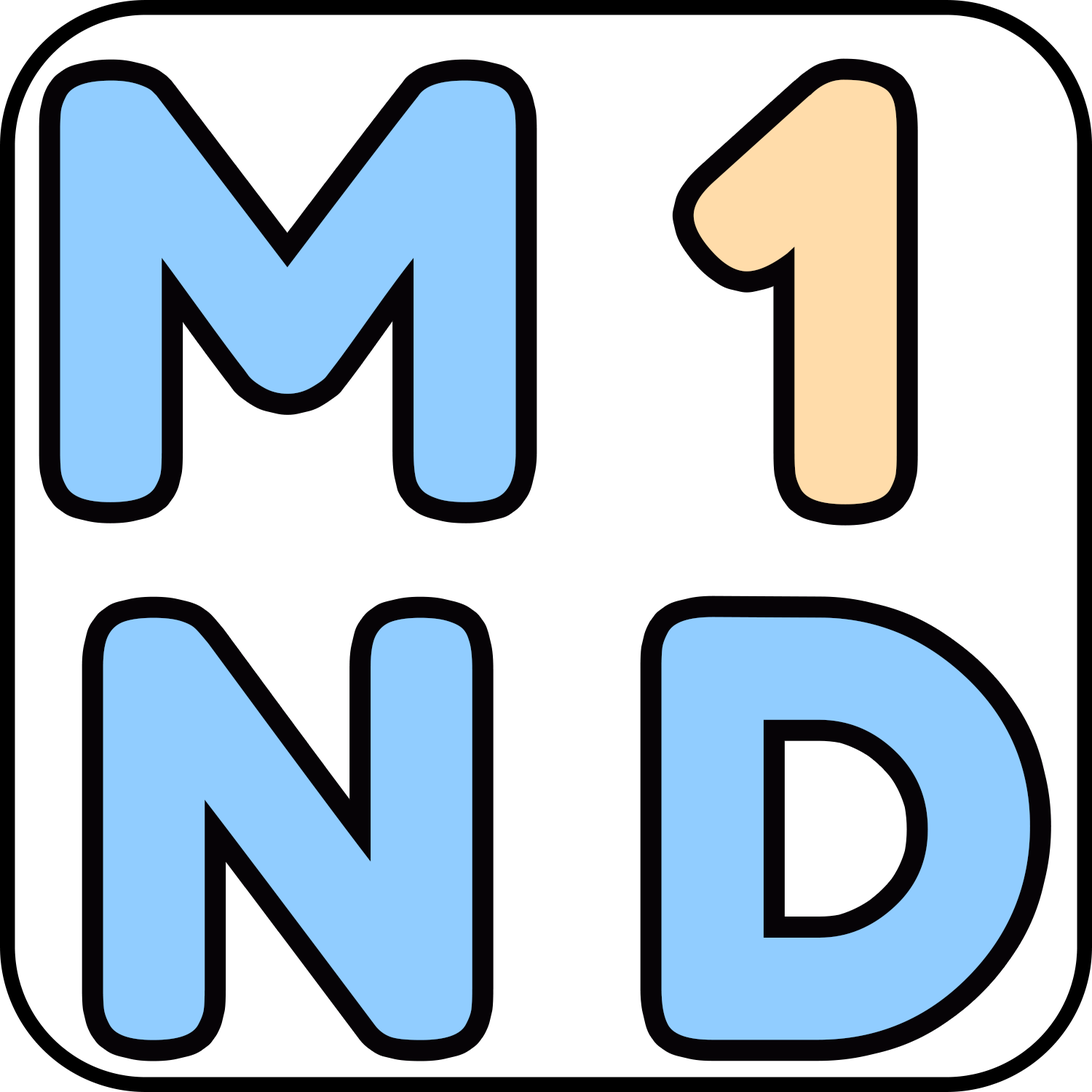
<style>
.page{position:relative;width:1092px;height:1092px;background:#ffffff}
.page>*{position:absolute;margin:0}
.t1{font:576.3px "FredokaOne-Regular";color:#91cdff}
.t2{font:576.3px "FredokaOne-Regular";color:#ffdcaa}
</style>
<div class="page">
<p class="t1" style="left:60px;top:80px;width:456px;height:422px">M</p>
<p class="t2" style="left:693px;top:79px;width:204px;height:425px">1</p>
<p class="t1" style="left:103px;top:617px;width:369px;height:423px">N</p>
<p class="t1" style="left:661px;top:617px;width:369px;height:423px">D</p>
</div>
